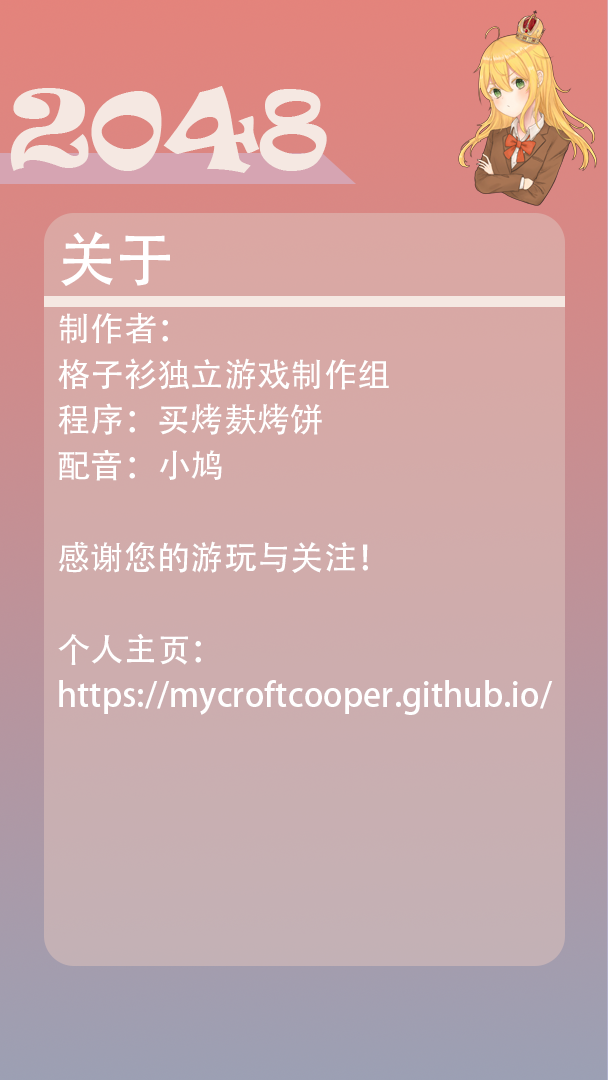
<style>
.page{position:relative;width:608px;height:1080px}
.page>*{position:absolute;margin:0}
.t1{font:100px "Ravie";color:#f5e8e2}
.t2{font:58.3px "AdobeHeitiStd-Regular";color:#ffffff}
.t3{font:33.3px/45.8px "AdobeHeitiStd-Regular";color:#ffffff}
</style>
<div class="page">
<p class="t1" style="left:10px;top:86px;width:317px;height:87px">2048</p>
<p class="t2" style="left:61px;top:231px;width:109px;height:55px">关于</p>
<p class="t3" style="left:58px;top:312px;width:495px;height:403px">制作者：<br>格子衫独立游戏制作组<br>程序：买烤麸烤饼<br>配音：小鸠<br><br>感谢您的游玩与关注！<br><br>个人主页：https://mycroftcooper.github.io/</p>
</div>
